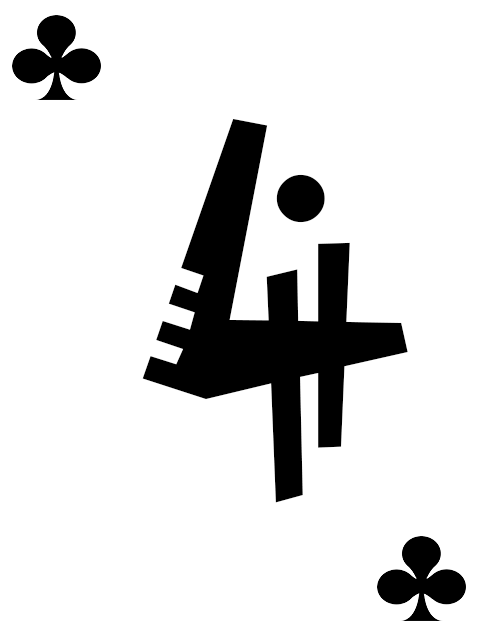
<style>
.page{position:relative;width:480px;height:640px;background:#ffffff}
.page>*{position:absolute;margin:0}
.t1{font:386.3px "Jokerman-Regular";color:#000000}
</style>
<div class="page">
<p class="t1" style="left:142px;top:119px;width:266px;height:384px">4</p>
</div>
